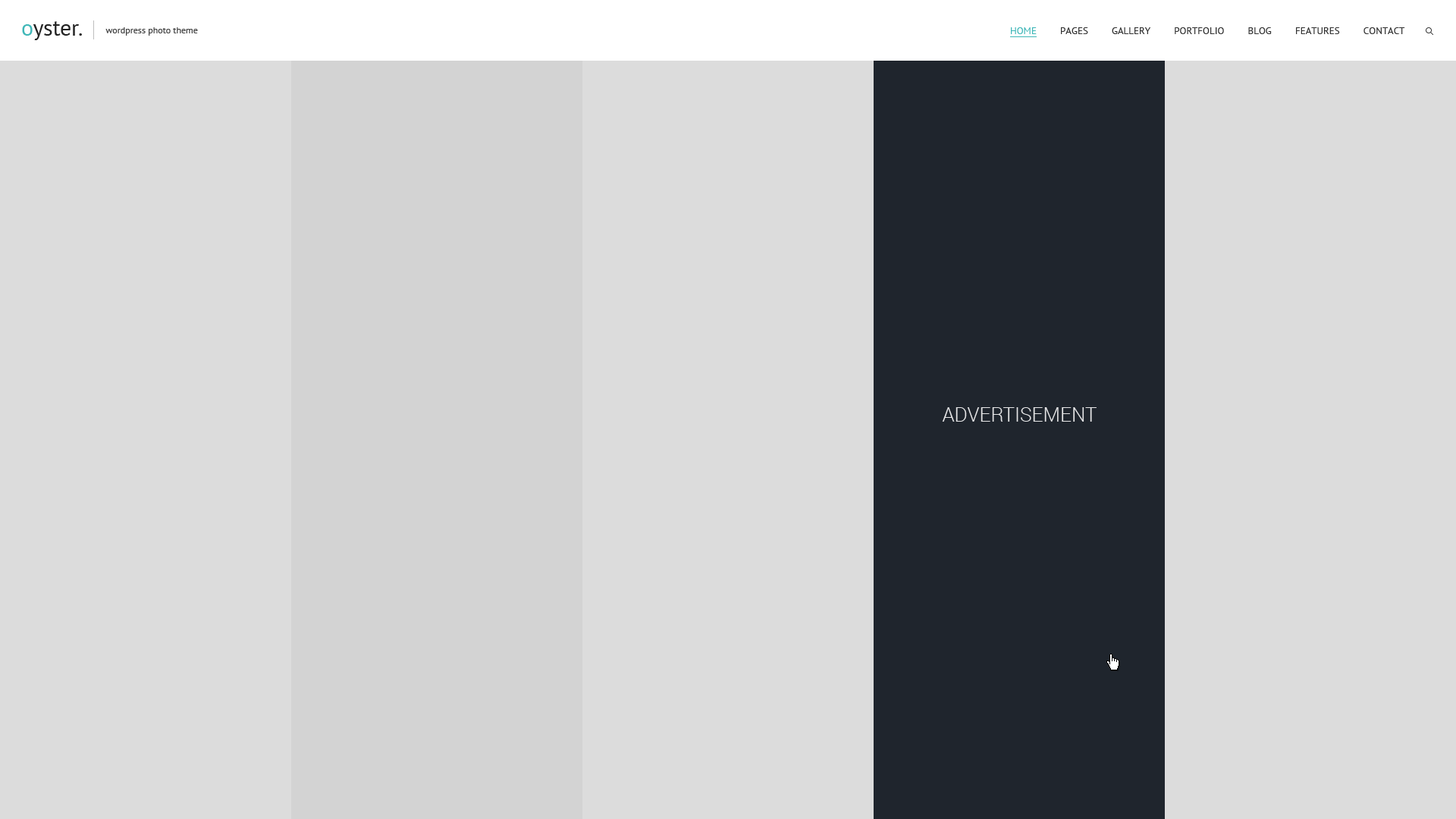
<style>
.page{position:relative;width:1456px;height:819px;background:#dcdcdc}
.page>*{position:absolute;margin:0}
.t1{font:9.1px "PTSans-Regular";color:#434343}
.t2{font:9.9px "PTSans-Regular";color:#343434;text-transform:uppercase}
.t3{font:9.9px "PTSans-Regular";color:#40b7b8;text-transform:uppercase}
.t4{font:19.7px "Roboto-Light";color:#e6e6e7;text-transform:uppercase}
</style>
<div class="page">
<p class="t1" style="left:105px;top:27px;width:93px;height:9px">wordpress photo theme</p>
<p class="t2" style="left:1011px;top:27px;width:394px;height:7px"><span class="t3">Home </span>        Pages         Gallery         Portfolio         Blog         Features         Contact</p>
<p class="t4" style="left:942px;top:407px;width:155px;height:15px">Advertisement</p>
</div>
